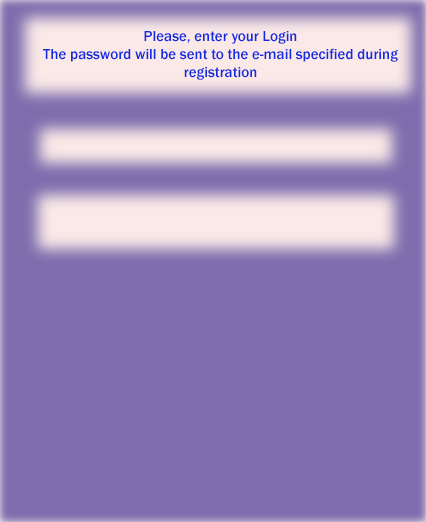
<style>
.page{position:relative;width:426px;height:522px;background:#7d6dad}
.page>*{position:absolute;margin:0}
.t1{font:15px "FranklinGothic-Medium";color:#132ce1}
</style>
<div class="page">
<p class="t1" style="left:43px;top:31px;width:355px;height:49px;text-align:center">Please, enter your Login<br>The password will be sent to the e-mail specified during registration</p>
</div>
